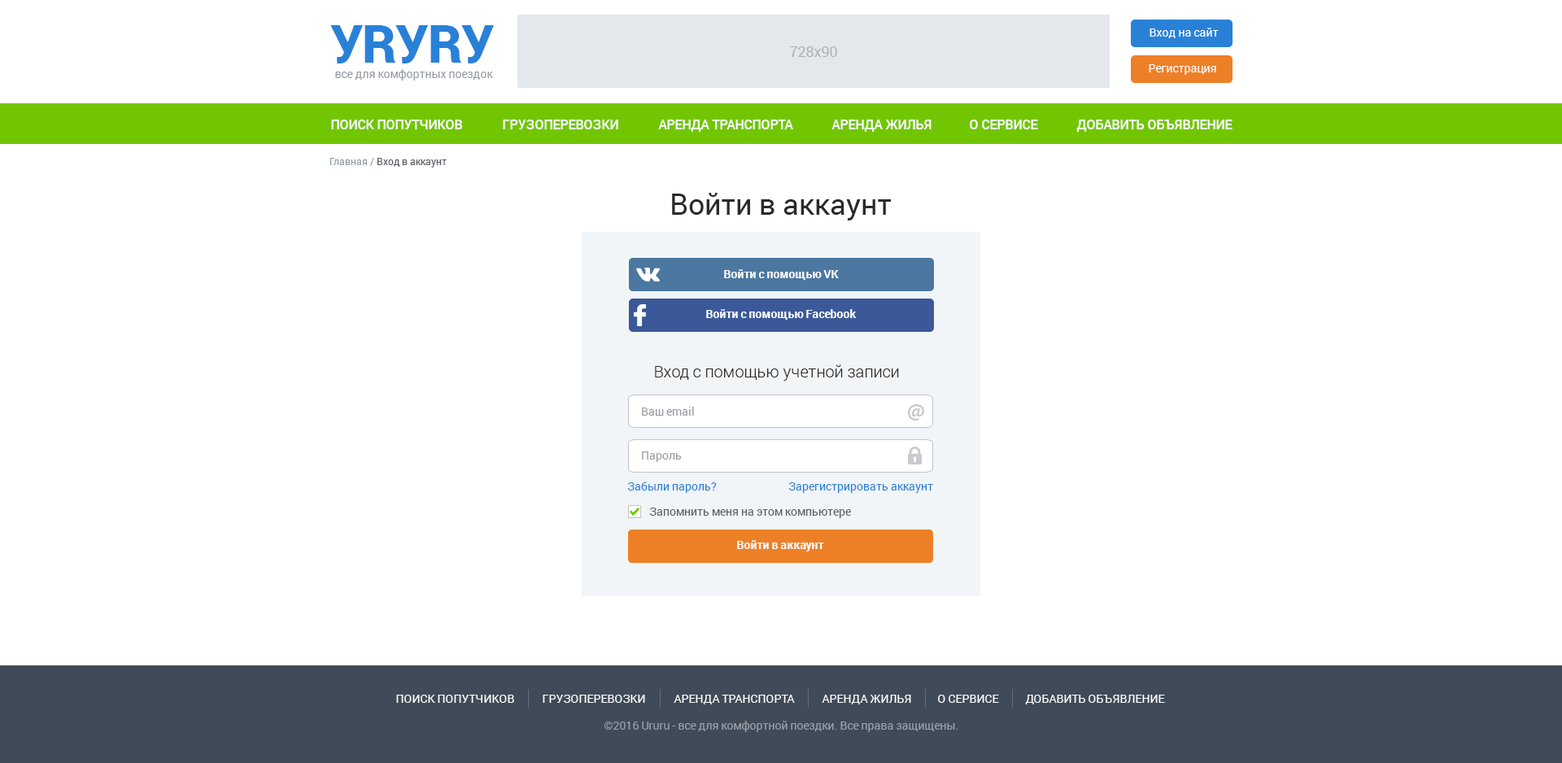
<style>
.page{position:relative;width:1562px;height:763px;background:#ffffff}
.page>*{position:absolute;margin:0}
.t1{font:52.1px "Roboto-Black";letter-spacing:-0.01em;color:#2981d7}
.t2{font:11.4px "Roboto-Regular";color:#ffffff}
.t3{font:14.6px "Roboto-Regular";color:#acb2b8}
.t4{font:11.4px "Roboto-Regular";color:#949ca5}
.t5{font:13px "Roboto-Medium";color:#ffffff;text-transform:uppercase}
.t6{font:9.8px "Roboto-Regular";color:#585e64}
.t7{font:9.8px "Roboto-Regular";color:#949ca5}
.t8{font:29.3px "Roboto-Regular";color:#2a2a2a}
.t9{font:11.4px "Roboto-Bold";color:#ffffff}
.t10{font:16.3px "Roboto-Light";color:#2a2a2a}
.t11{font:11.4px "Roboto-Regular";color:#989b9e}
.t12{font:11.4px "Roboto-Regular";color:#2981d7}
.t13{font:11.4px "Roboto-Regular";color:#585e64}
.t14{font:11.4px "Roboto-Regular";color:#ffffff;text-transform:uppercase}
.t15{font:11.4px "Roboto-Regular";color:#9ca0a6}
</style>
<div class="page">
<p class="t1" style="left:330px;top:25px;width:164px;height:38px">УRУRУ</p>
<p class="t2" style="left:1150px;top:28px;width:69px;height:10px">Вход на сайт</p>
<p class="t3" style="left:790px;top:46px;width:47px;height:11px">728x90</p>
<p class="t2" style="left:1149px;top:64px;width:67px;height:11px">Регистрация</p>
<p class="t4" style="left:335px;top:69px;width:158px;height:12px">все для комфортных поездок</p>
<p class="t5" style="left:331px;top:120px;width:132px;height:9px">Поиск попутчиков</p>
<p class="t5" style="left:503px;top:120px;width:115px;height:9px">грузоперевозки</p>
<p class="t5" style="left:658px;top:120px;width:135px;height:12px">Аренда транспорта</p>
<p class="t5" style="left:832px;top:120px;width:100px;height:12px">Аренда жилья</p>
<p class="t5" style="left:970px;top:120px;width:68px;height:9px">о сервисе</p>
<p class="t5" style="left:1077px;top:120px;width:156px;height:12px">добавить объявление</p>
<p class="t6" style="left:330px;top:158px;width:117px;height:10px"><span class="t7">Главная /</span> Вход в аккаунт</p>
<p class="t8" style="left:672px;top:193px;width:220px;height:28px">Войти в аккаунт</p>
<p class="t9" style="left:724px;top:269px;width:115px;height:11px">Войти с помощью VK</p>
<p class="t9" style="left:706px;top:309px;width:151px;height:11px">Войти с помощью Facebook</p>
<p class="t10" style="left:655px;top:365px;width:244px;height:16px">Вход с помощью учетной записи</p>
<p class="t11" style="left:642px;top:407px;width:52px;height:9px">Ваш email</p>
<p class="t11" style="left:642px;top:452px;width:40px;height:10px">Пароль</p>
<p class="t12" style="left:627px;top:482px;width:90px;height:11px">Забыли пароль?</p>
<p class="t12" style="left:788px;top:483px;width:145px;height:10px">Зарегистрировать аккаунт</p>
<p class="t13" style="left:649px;top:508px;width:202px;height:10px">Запомнить меня на этом компьютере</p>
<p class="t9" style="left:737px;top:540px;width:87px;height:12px">Войти в аккаунт</p>
<p class="t14" style="left:396px;top:695px;width:118px;height:8px">Поиск попутчиков</p>
<p class="t14" style="left:543px;top:695px;width:102px;height:8px">грузоперевозки</p>
<p class="t14" style="left:674px;top:695px;width:121px;height:10px">Аренда транспорта</p>
<p class="t14" style="left:822px;top:695px;width:89px;height:10px">Аренда жилья</p>
<p class="t14" style="left:938px;top:695px;width:61px;height:8px">о сервисе</p>
<p class="t14" style="left:1025px;top:695px;width:140px;height:10px">добавить объявление</p>
<p class="t15" style="left:605px;top:721px;width:354px;height:11px">©2016 Ururu - все для комфортной поездки. Все права защищены.</p>
</div>
